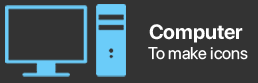
<style>
.page{position:relative;width:258px;height:83px;background:#333333}
.page>*{position:absolute;margin:0}
.t1{font:20.6px "SFProDisplay-Bold";color:#ffffff}
.t2{font:16.9px "SFProDisplay-Regular";color:#ffffff}
</style>
<div class="page">
<p class="t1" style="left:149px;top:24px;width:94px;height:19px">Computer</p>
<p class="t2" style="left:148px;top:47px;width:100px;height:13px">To make icons</p>
</div>
